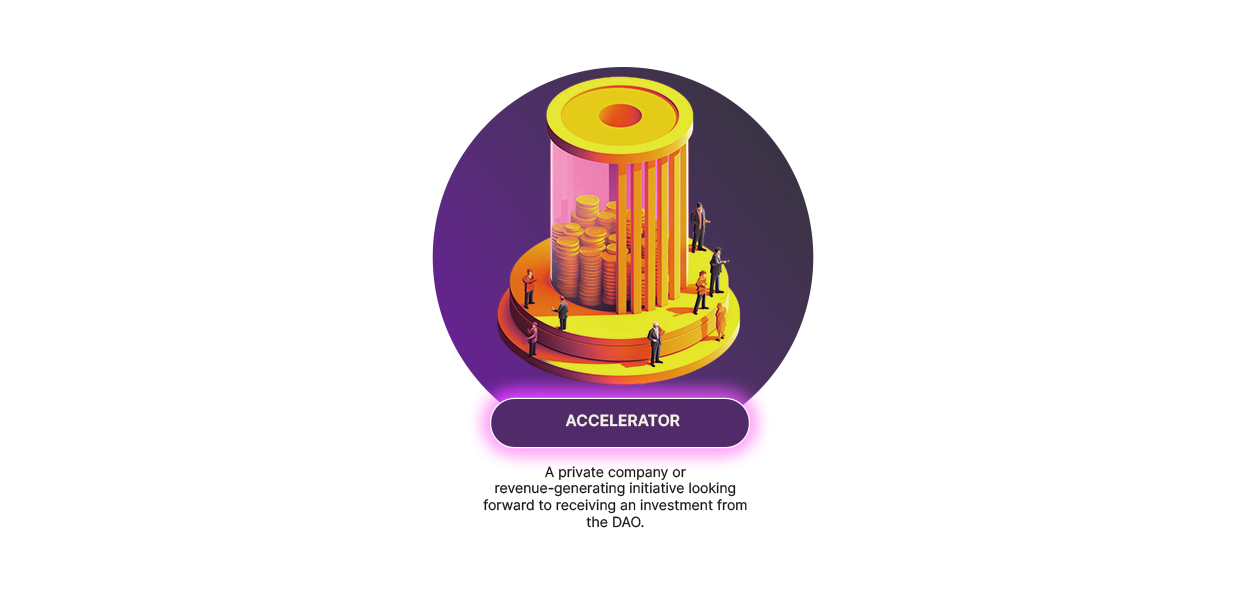
<style>
.page{position:relative;width:1240px;height:600px;background:#ffffff}
.page>*{position:absolute;margin:0}
.t1{font:15.4px "Inter-SemiBold";color:#f3f2eb;text-transform:uppercase}
.t2{font:14px "Inter-Regular";color:#1a1a19}
</style>
<div class="page">
<p class="t1" style="left:565px;top:414px;width:115px;height:13px">Accelerator</p>
<p class="t2" style="left:483px;top:466px;width:264px;height:62px;text-align:center">A private company or revenue-generating initiative looking forward to receiving an investment from the DAO.</p>
</div>
